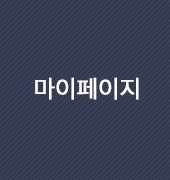
<style>
.page{position:relative;width:170px;height:180px;background:#323950}
.page>*{position:absolute;margin:0}
.t1{font:24px "NotoSansCJKkr-Regular";letter-spacing:-0.05em;color:#ffffff;font-weight:bold}
</style>
<div class="page">
<p class="t1" style="left:35px;top:77px;width:104px;height:23px">마이페이지</p>
</div>
